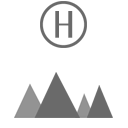
<style>
.page{position:relative;width:128px;height:128px;background:#ffffff}
.page>*{position:absolute;margin:0}
.t1{font:30px "TVpl";letter-spacing:0.05em;color:#6a6a6a}
</style>
<div class="page">
<p class="t1" style="left:55px;top:11px;width:18px;height:27px">H</p>
</div>
